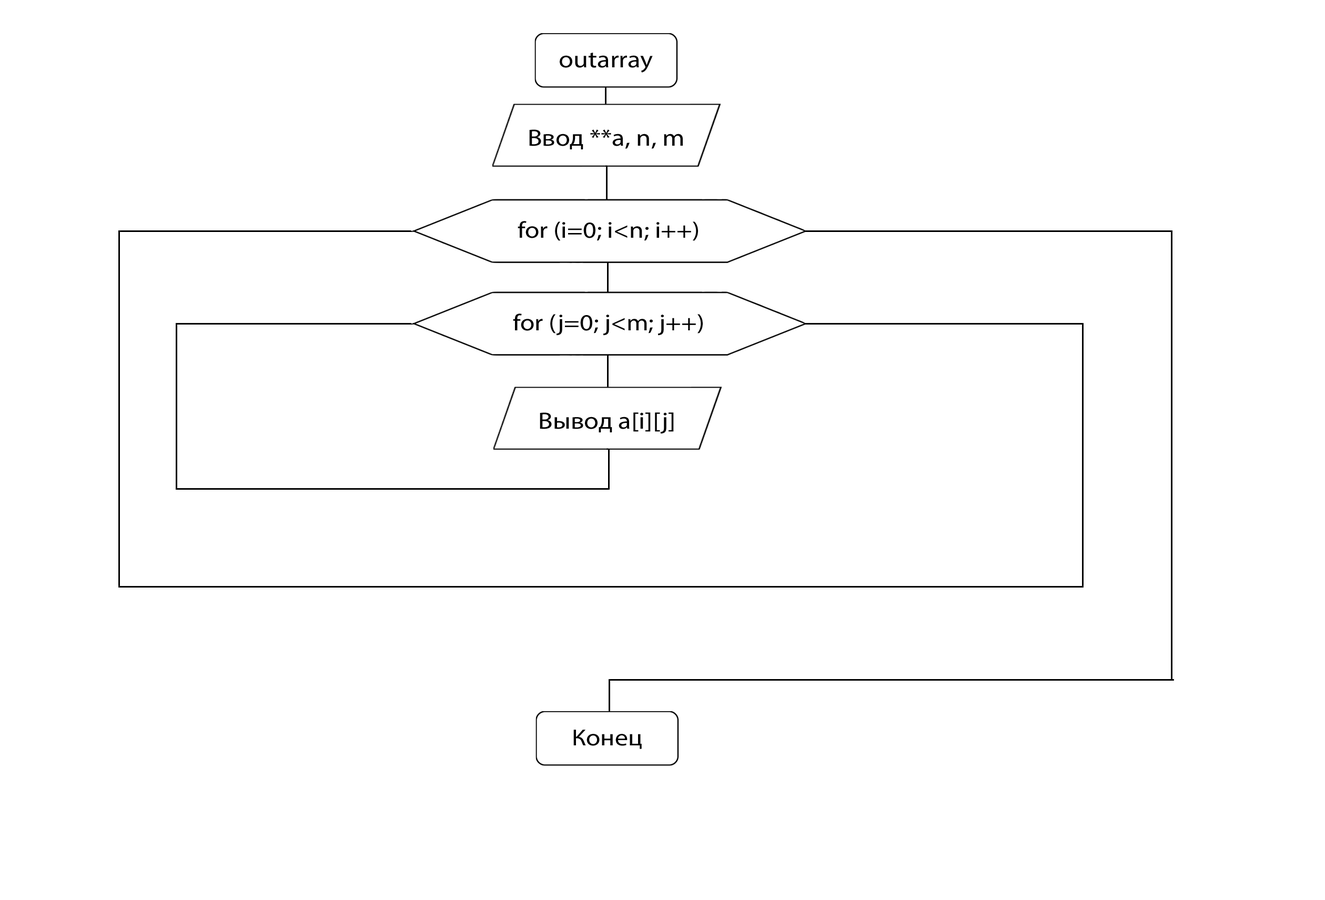
<style>
.page{position:relative;width:1325px;height:900px;background:#ffffff}
.page>*{position:absolute;margin:0}
.t1{font:23.6px "MyriadPro-Regular";color:#000000;scale:1.14 1}
.t2{font:23.1px "MyriadPro-Regular";color:#000000;scale:1.14 1}
</style>
<div class="page">
<p class="t1" style="left:560px;top:53px;width:93px;height:20px">outarray</p>
<p class="t1" style="left:529px;top:129px;width:154px;height:20px">Ввод **a, n, m</p>
<p class="t2" style="left:518px;top:221px;width:180px;height:20px">for (i=0; i&lt;n; i++)</p>
<p class="t2" style="left:513px;top:313px;width:190px;height:23px">for (j=0; j&lt;m; j++)</p>
<p class="t1" style="left:540px;top:412px;width:134px;height:22px">Вывод a[i][j]</p>
<p class="t2" style="left:573px;top:730px;width:69px;height:19px">Конец</p>
</div>
